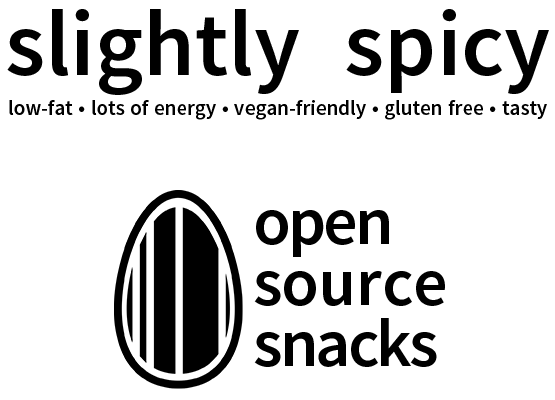
<style>
.page{position:relative;width:555px;height:400px;background:#ffffff}
.page>*{position:absolute;margin:0}
.t1{font:93px "SourceSansPro-Semibold";color:#000000}
.t2{font:21px "SourceSansPro-Semibold";color:#000000}
.t3{font:68px/61px "SourceSansPro-Semibold";color:#000000}
</style>
<div class="page">
<p class="t1" style="left:7px;top:9px;width:542px;height:86px">slightly spicy</p>
<p class="t1" style="left:7px;top:9px;width:542px;height:86px">slightly spicy</p>
<p class="t2" style="left:9px;top:100px;width:538px;height:20px">low-fat • lots of energy • vegan-friendly • gluten free • tasty</p>
<p class="t3" style="left:254px;top:210px;width:191px;height:157px">open<br>source<br>snacks</p>
</div>
